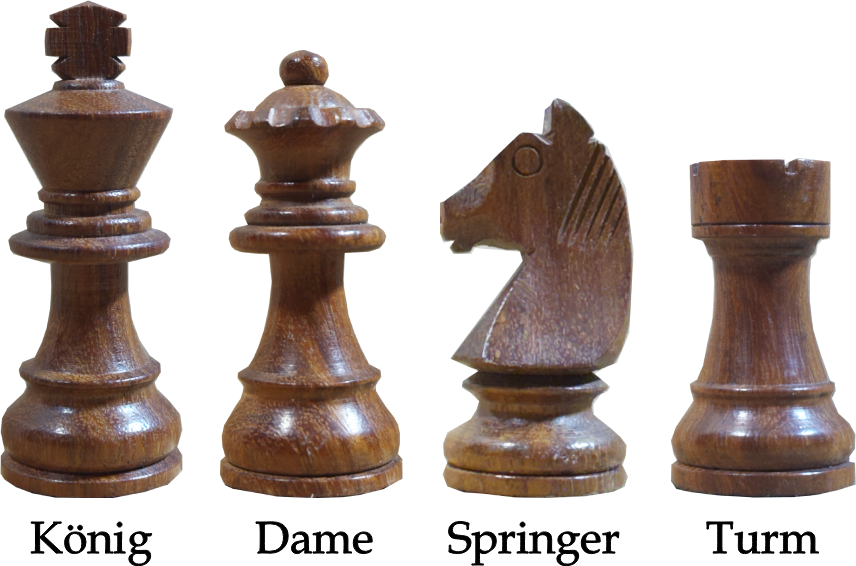
<style>
.page{position:relative;width:856px;height:566px;background:#ffffff}
.page>*{position:absolute;margin:0}
.t1{font:45px "BookAntiqua";color:#000000}
</style>
<div class="page">
<p class="t1" style="left:30px;top:520px;width:123px;height:47px">König</p>
<p class="t1" style="left:254px;top:520px;width:120px;height:35px">Dame</p>
<p class="t1" style="left:447px;top:520px;width:173px;height:47px">Springer</p>
<p class="t1" style="left:705px;top:520px;width:115px;height:35px">Turm</p>
</div>
